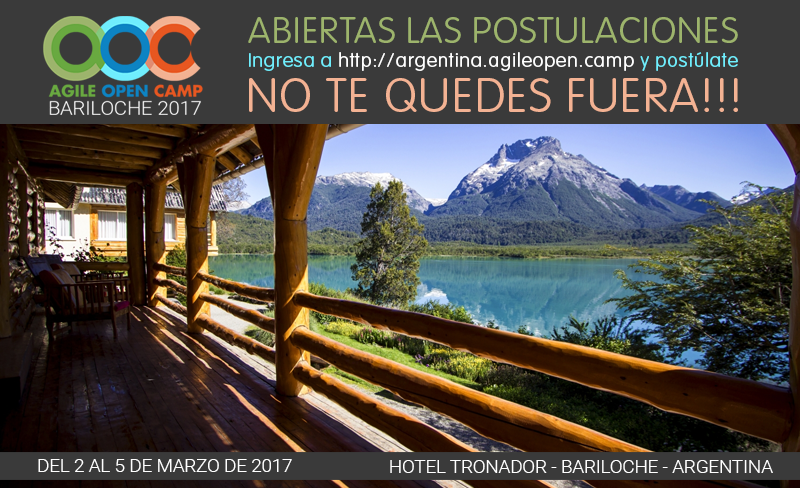
<style>
.page{position:relative;width:800px;height:488px;background:#3a3a3a}
.page>*{position:absolute;margin:0}
.t1{font:36px "VAGRoundedStd-Thin";letter-spacing:0.025em;color:#9db46c;scale:1.04 1}
.t2{font:19.7px "VAGRoundedStd-Thin";letter-spacing:0.025em;color:#ffffff;scale:1.04 1}
.t3{font:19.7px "VAGRoundedStd-Thin";letter-spacing:0.025em;color:#70eefd;scale:1.04 1}
.t4{font:46.7px "VAGRoundedStd-Thin";letter-spacing:0.025em;color:#f3b293;scale:1.04 1}
.t5{font:18px "Roboto-Light";letter-spacing:-0.005em;color:#ffffff;text-transform:uppercase;scale:1.04 1}
</style>
<div class="page">
<p class="t1" style="left:248px;top:17px;width:490px;height:26px">ABIERTAS LAS POSTULACIONES</p>
<p class="t2" style="left:249px;top:52px;width:489px;height:19px"><span class="t3">Ingresa a </span>http://argentina.agileopen.camp<span class="t3"> y postúlate</span></p>
<p class="t4" style="left:249px;top:78px;width:489px;height:34px">NO TE QUEDES FUERA!!!</p>
<p class="t5" style="left:38px;top:459px;width:254px;height:13px">Del 2 al 5 de marzo de 2017</p>
<p class="t5" style="left:390px;top:460px;width:383px;height:13px">hotel tronador - BARILOCHE - ARGENTINA</p>
</div>
